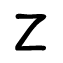
<style>
.page{position:relative;width:63px;height:63px;background:#ffffff}
.page>*{position:absolute;margin:0}
.t1{font:48px "ComicSansMS";color:#000000}
</style>
<div class="page">
<p class="t1" style="left:15px;top:13px;width:32px;height:38px">Z</p>
</div>
